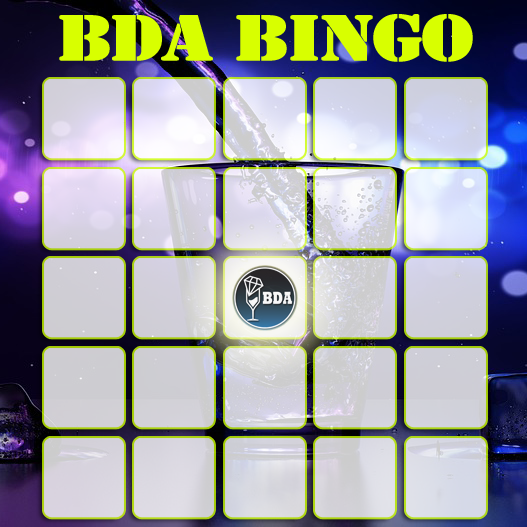
<style>
.page{position:relative;width:527px;height:527px}
.page>*{position:absolute;margin:0}
.t1{font:60px "StencilStd";letter-spacing:-0.04em;color:#d8ff00;text-transform:uppercase;font-weight:bold;scale:1.2 1}
</style>
<div class="page">
<p class="t1" style="left:59px;top:14px;width:414px;height:48px">BDA BINGO</p>
</div>
